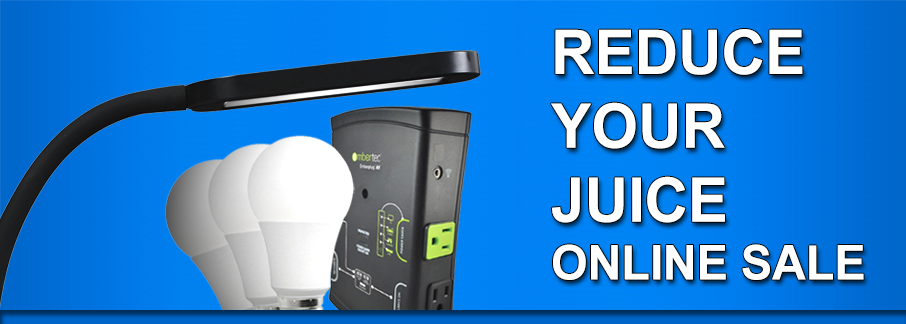
<style>
.page{position:relative;width:906px;height:324px}
.page>*{position:absolute;margin:0}
.t1{font:61.6px "Arial-BoldMT";letter-spacing:-0.005em;color:#ffffff}
.t2{font:48px "Arial-BoldMT";letter-spacing:-0.005em;color:#ffffff}
</style>
<div class="page">
<p class="t1" style="left:551px;top:29px;width:313px;height:251px">REDUCE<br>YOUR<br>JUICE<br><span class="t2">ONLINE SALE</span></p>
</div>
